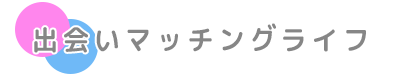
<style>
.page{position:relative;width:400px;height:76px;background:#ffffff}
.page>*{position:absolute;margin:0}
.t1{font:28px "ueten-1c-bold";letter-spacing:0.18em;color:#878787}
</style>
<div class="page">
<p class="t1" style="left:34px;top:23px;width:332px;height:30px">出会いマッチングライフ</p>
</div>
